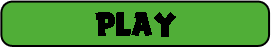
<style>
.page{position:relative;width:271px;height:47px;background:#50ae37}
.page>*{position:absolute;margin:0}
.t1{font:18px "SpaceComics";color:#000000}
</style>
<div class="page">
<p class="t1" style="left:95px;top:12px;width:81px;height:25px">PLAY</p>
</div>
